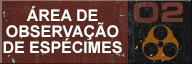
<style>
.page{position:relative;width:192px;height:64px}
.page>*{position:absolute;margin:0}
.t1{font:16px/16px "Arial-BoldMT";color:#ffffff;text-transform:uppercase}
</style>
<div class="page">
<p class="t1" style="left:3px;top:6px;width:119px;height:48px;text-align:center">Área de<br>observação<br>de espécimes</p>
</div>
